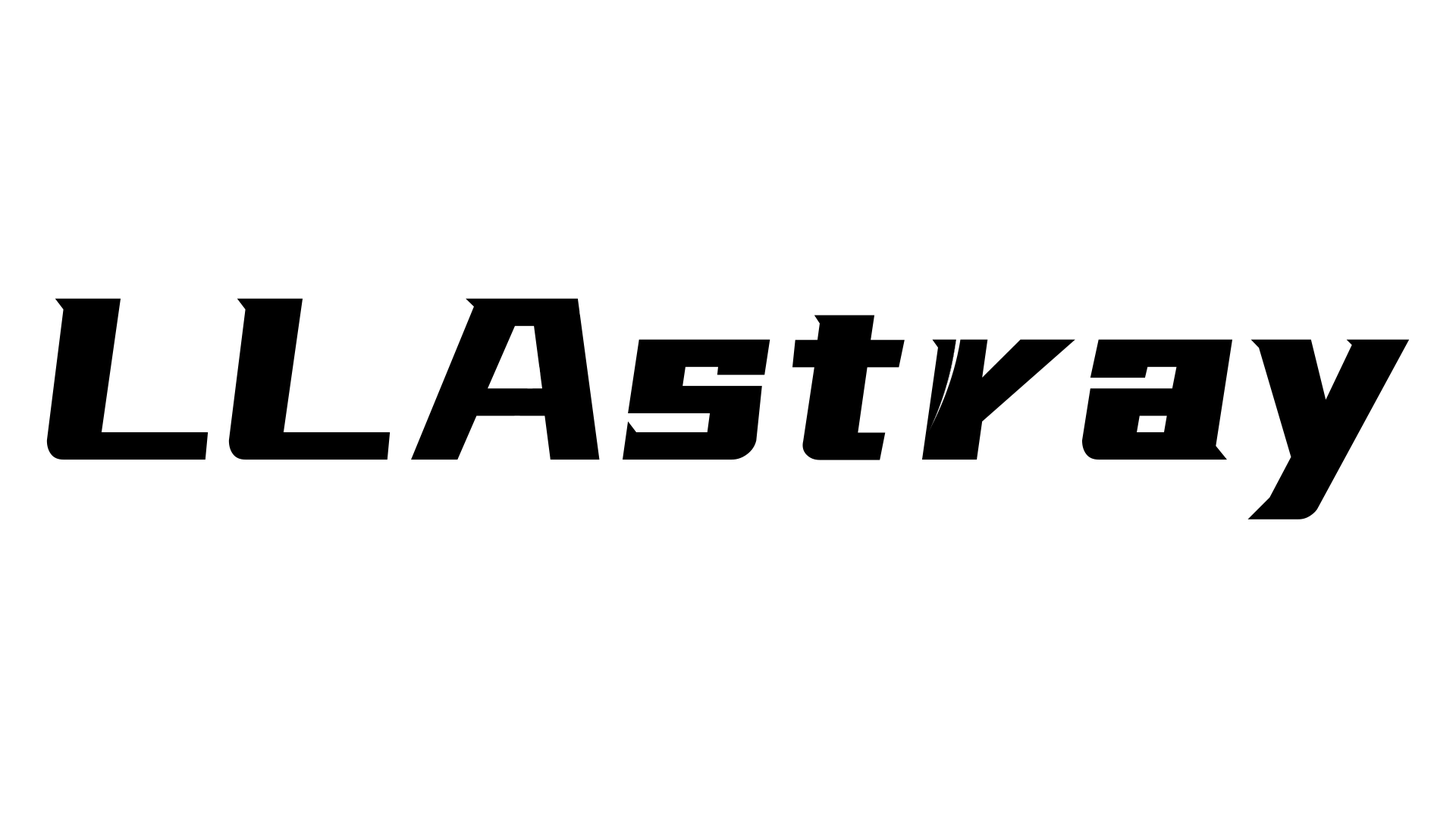
<style>
.page{position:relative;width:1456px;height:819px;background:#ffffff}
.page>*{position:absolute;margin:0}
.t1{font:284.4px "YouSheBiaoTiHei";color:#000000}
</style>
<div class="page">
<p class="t1" style="left:46px;top:298px;width:1364px;height:221px">LLAstray</p>
</div>
